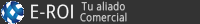
<style>
.page{position:relative;width:200px;height:24px;background:#333333}
.page>*{position:absolute;margin:0}
.t1{font:13.8px "OpenSans-Light";letter-spacing:0.04em;color:#f8f8f8;font-weight:bold;scale:0.87 1}
.t2{font:8.1px "OpenSans-Light";letter-spacing:0.04em;color:#cecece;font-weight:bold;scale:0.87 1}
</style>
<div class="page">
<p class="t1" style="left:31px;top:4px;width:42px;height:15px">E-ROI</p>
<p class="t2" style="left:80px;top:1px;width:47px;height:21px;text-align:center">Tu aliado<br>Comercial</p>
</div>
